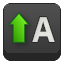
<style>
.page{position:relative;width:64px;height:64px}
.page>*{position:absolute;margin:0}
.t1{font:36.1px "AcuminConcept-Bold";color:#e1e1dc;scale:0.93 1}
</style>
<div class="page">
<p class="t1" style="left:32px;top:17px;width:23px;height:25px">A</p>
</div>
